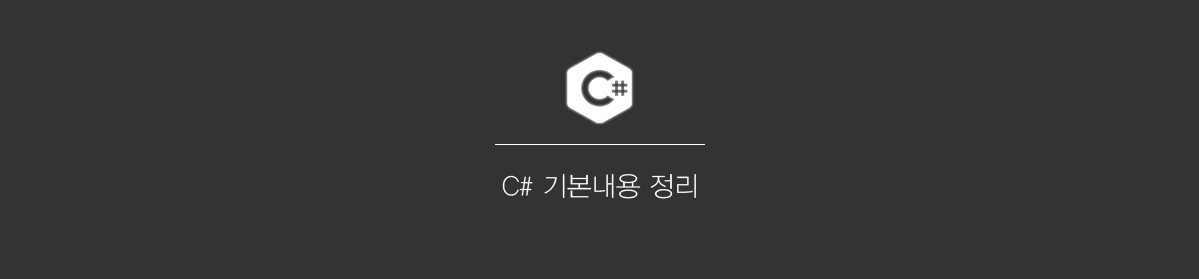
<style>
.page{position:relative;width:1199px;height:279px;background:#333333}
.page>*{position:absolute;margin:0}
.t1{font:26.7px "YDIYGO310";color:#ffffff}
</style>
<div class="page">
<p class="t1" style="left:502px;top:174px;width:194px;height:25px">C# 기본내용 정리</p>
</div>
